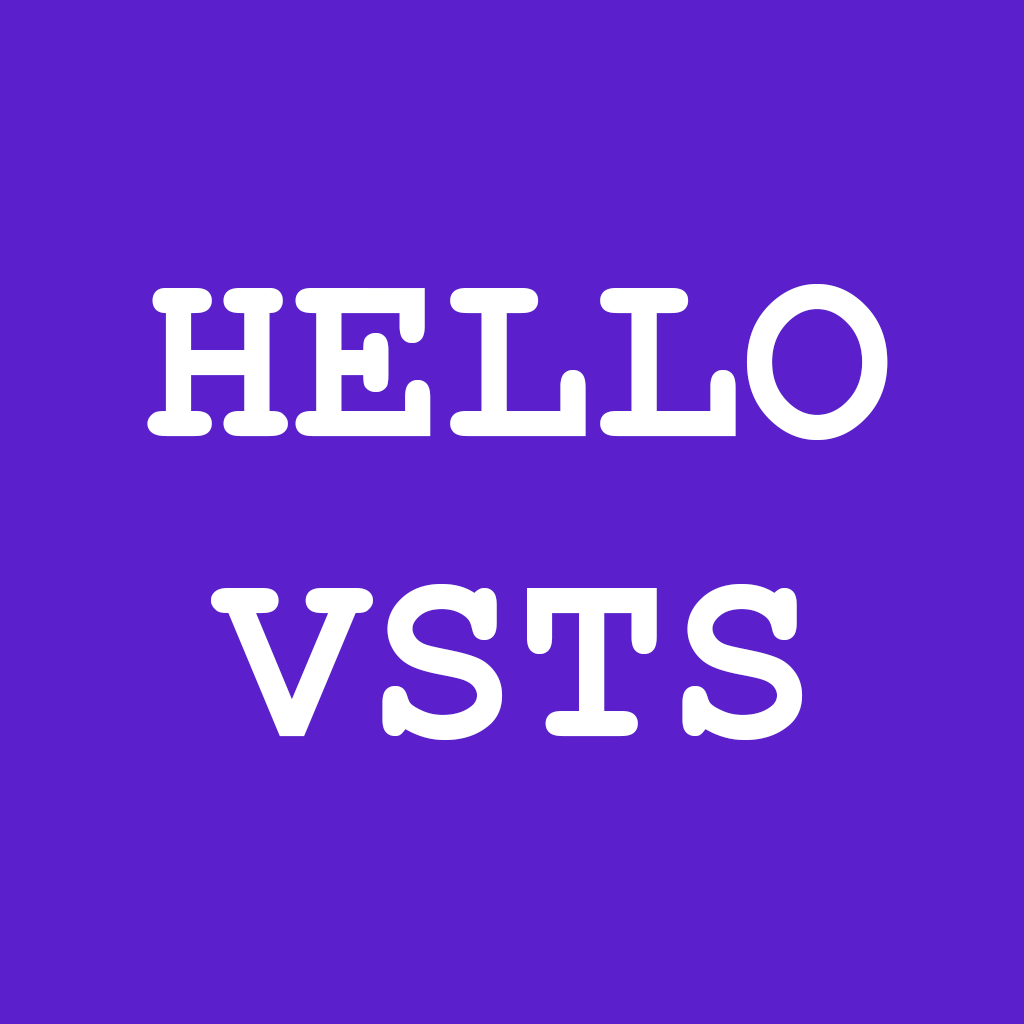
<style>
.page{position:relative;width:1024px;height:1024px;background:#5c1fcc}
.page>*{position:absolute;margin:0}
.t1{font:250px "CourierNewPS-BoldMT";color:#ffffff}
</style>
<div class="page">
<p class="t1" style="left:147px;top:284px;width:741px;height:456px;text-align:center">HELLO<br>VSTS</p>
</div>
